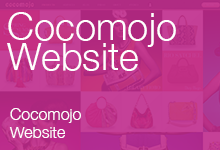
<style>
.page{position:relative;width:220px;height:150px}
.page>*{position:absolute;margin:0}
.t1{font:38px/30px "HelveticaNeue-Light";color:#ffffff}
.t2{font:16px/18px "HelveticaNeue-Light";color:#ffffff}
</style>
<div class="page">
<p class="t1" style="left:7px;top:12px;width:169px;height:59px">Cocomojo<br>Website</p>
<p class="t2" style="left:9px;top:108px;width:72px;height:30px">Cocomojo<br>Website</p>
</div>
